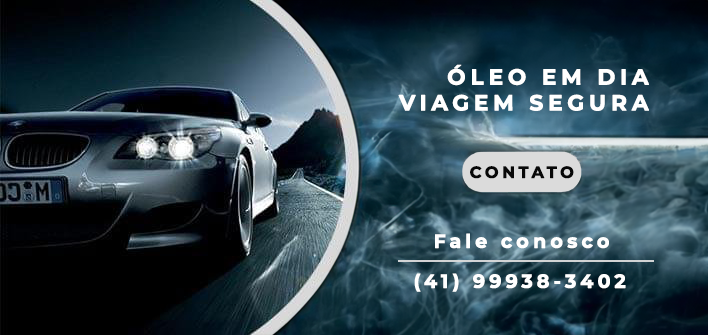
<style>
.page{position:relative;width:708px;height:335px}
.page>*{position:absolute;margin:0}
.t1{font:21.5px "Montserrat-Bold";letter-spacing:0.2em;color:#ffffff;font-weight:bold}
.t2{font:16px "Montserrat-Bold";letter-spacing:0.2em;color:#070707;font-weight:bold}
.t3{font:18.8px "Montserrat-Bold";letter-spacing:0.2em;color:#ffffff;font-weight:bold}
</style>
<div class="page">
<p class="t1" style="left:398px;top:64px;width:251px;height:47px;text-align:right">ÓLEO EM DIA<br>VIAGEM SEGURA</p>
<p class="t2" style="left:470px;top:166px;width:104px;height:13px">CONTATO</p>
<p class="t3" style="left:435px;top:233px;width:174px;height:16px">Fale conosco</p>
<p class="t3" style="left:414px;top:273px;width:212px;height:19px">(41) 99938-3402</p>
</div>
